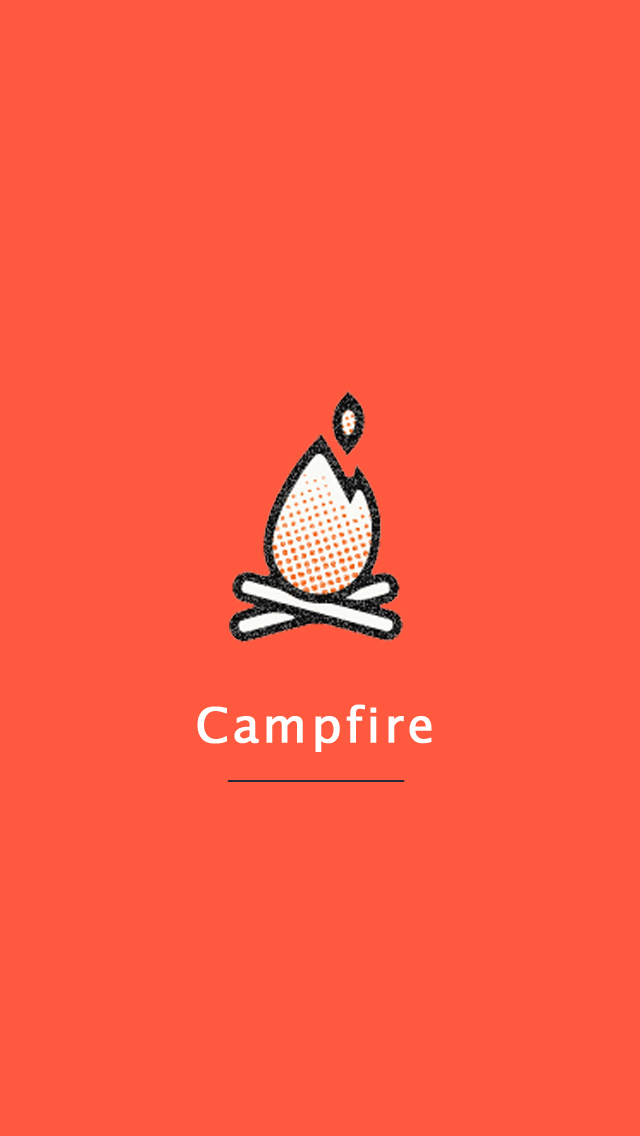
<style>
.page{position:relative;width:640px;height:1136px;background:#ff5a3f}
.page>*{position:absolute;margin:0}
.t1{font:48px "LucidaSans";letter-spacing:0.05em;color:#ffffff;font-weight:bold}
</style>
<div class="page">
<p class="t1" style="left:197px;top:704px;width:235px;height:48px">Campfire</p>
</div>
